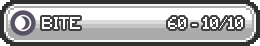
<style>
.page{position:relative;width:260px;height:46px;background:#ababab}
.page>*{position:absolute;margin:0}
.t1{font:16px "Minecraft";color:#ffffff}
</style>
<div class="page">
<p class="t1" style="left:42px;top:17px;width:38px;height:12px">BITE</p>
<p class="t1" style="left:168px;top:17px;width:75px;height:12px">60 - 10/10</p>
</div>
